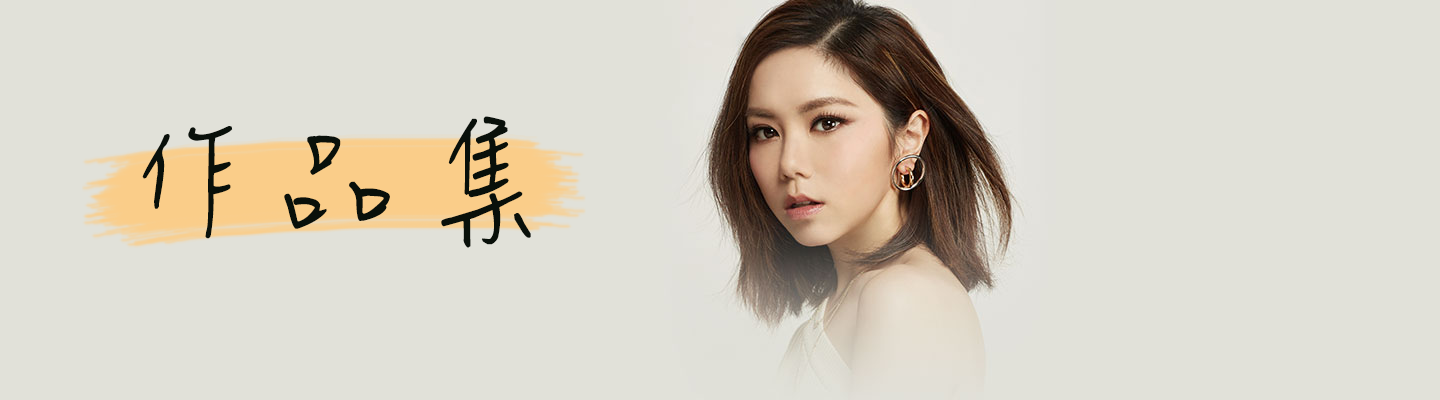
<style>
.page{position:relative;width:1440px;height:400px;background:#e1e1d9}
.page>*{position:absolute;margin:0}
.t1{font:133.7px "DFHsiuStd-W3";color:#09100a}
</style>
<div class="page">
<p class="t1" style="left:142px;top:116px;width:389px;height:132px">作品集</p>
</div>
